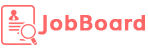
<style>
.page{position:relative;width:148px;height:50px;background:#ffffff}
.page>*{position:absolute;margin:0}
.t1{font:22px "Muli-Bold";letter-spacing:0.01em;color:#ff6666;font-weight:bold}
</style>
<div class="page">
<p class="t1" style="left:38px;top:15px;width:107px;height:20px">JobBoard</p>
</div>
